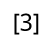
<style>
.page{position:relative;width:53px;height:41px;background:#ffffff}
.page>*{position:absolute;margin:0}
.t1{font:23.7px "DroidSans";color:#000000}
</style>
<div class="page">
<p class="t1" style="left:14px;top:13px;width:25px;height:22px">[3]</p>
</div>
